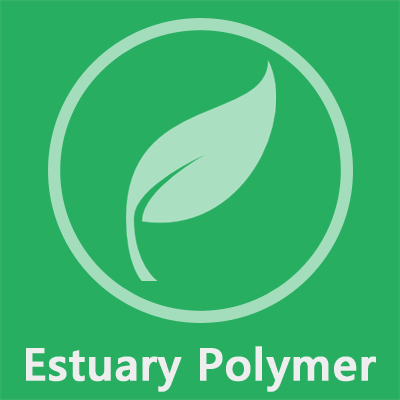
<style>
.page{position:relative;width:400px;height:400px;background:#27ae60}
.page>*{position:absolute;margin:0}
.t1{font:45.8px "SegoeUI-SemiBold";color:#eeeeee;font-weight:bold}
</style>
<div class="page">
<p class="t1" style="left:26px;top:346px;width:350px;height:46px">Estuary Polymer</p>
</div>
